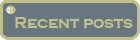
<style>
.page{position:relative;width:140px;height:40px;background:#67767f}
.page>*{position:absolute;margin:0}
.t1{font:16px "CopperplateGothic-Bold";color:#c1c08c}
</style>
<div class="page">
<p class="t1" style="left:15px;top:17px;width:118px;height:12px">Recent posts</p>
</div>
